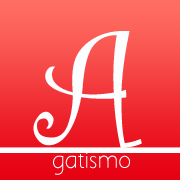
<style>
.page{position:relative;width:180px;height:180px}
.page>*{position:absolute;margin:0}
.t1{font:168.8px "CurlzMT";color:#fbfdfe}
.t2{font:20.2px "AaarghNormal";color:#fbfdfe}
</style>
<div class="page">
<p class="t1" style="left:33px;top:31px;width:109px;height:118px">A</p>
<p class="t2" style="left:53px;top:153px;width:77px;height:22px">gatismo</p>
</div>
